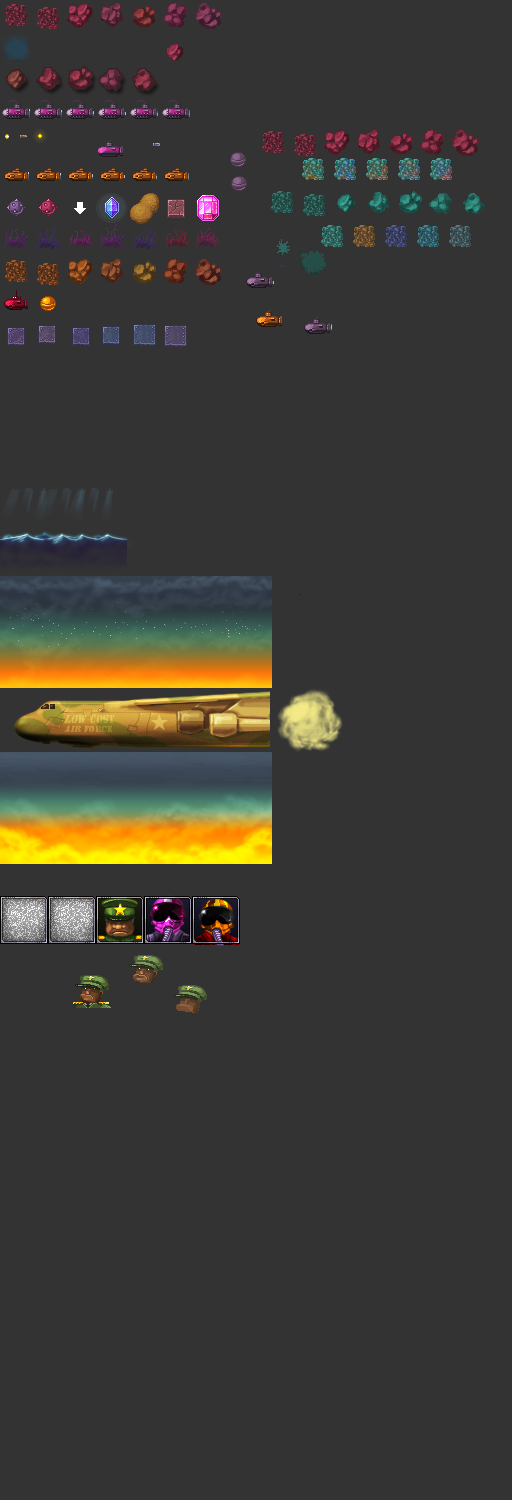
<style>
.page{position:relative;width:512px;height:1500px;background:#333333}
.page>*{position:absolute;margin:0}
.t1{font:8.1px/9px "StencilStd"}
.t2{font:10.1px/9px "StencilStd"}
</style>
<div class="page">
<p class="t1" style="left:64px;top:714px;width:51px;height:18px;text-align:center"><span class="t2">low cost<br></span>air force</p>
</div>
